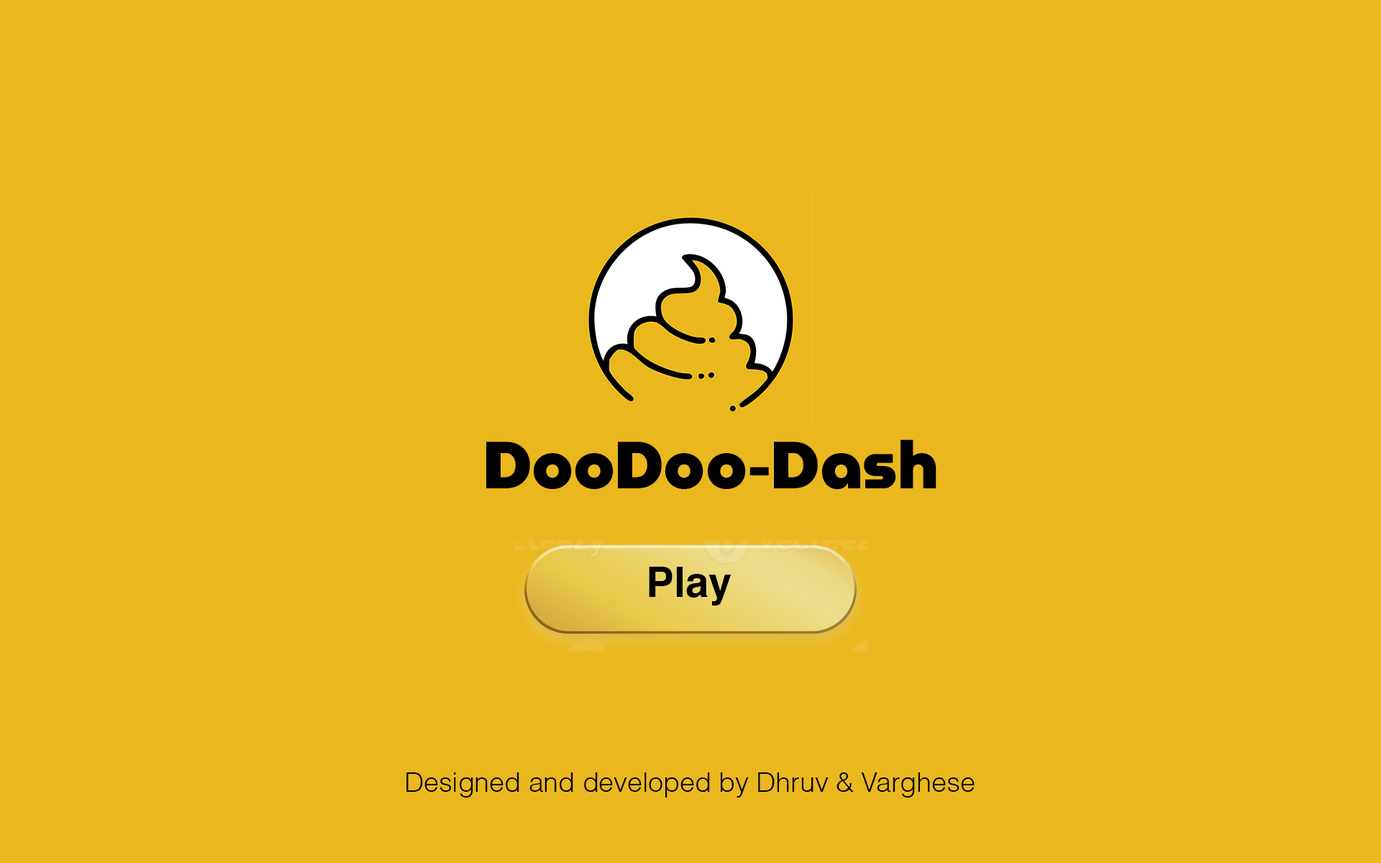
<style>
.page{position:relative;width:1381px;height:863px;background:#eab71e}
.page>*{position:absolute;margin:0}
.t1{font:66.5px "MuseoModerno-Black";color:#000000}
.t2{font:41.7px "Helvetica-Bold";color:#000000}
.t3{font:27px "Helvetica-Light";color:#000000}
</style>
<div class="page">
<p class="t1" style="left:486px;top:440px;width:451px;height:50px">DooDoo-Dash</p>
<p class="t2" style="left:649px;top:567px;width:83px;height:39px">Play</p>
<p class="t3" style="left:406px;top:773px;width:569px;height:25px">Designed and developed by Dhruv &amp; Varghese</p>
</div>
